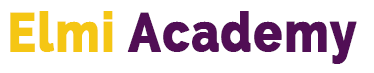
<style>
.page{position:relative;width:374px;height:73px;background:#ffffff}
.page>*{position:absolute;margin:0}
.t1{font:54.8px "Raleway-ExtraBold";letter-spacing:0.02em;color:#510e55;font-weight:bold;scale:0.85 1}
.t2{font:54.8px "Raleway-ExtraBold";letter-spacing:0.02em;color:#f5c614;font-weight:bold;scale:0.85 1}
</style>
<div class="page">
<p class="t1" style="left:10px;top:11px;width:347px;height:53px"><span class="t2">Elmi </span>Academy</p>
</div>
